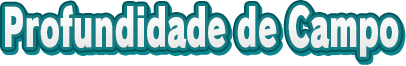
<style>
.page{position:relative;width:406px;height:66px;background:#ffffff}
.page>*{position:absolute;margin:0}
.t1{font:52px "RodinPro-UB";letter-spacing:-0.003em;color:#f3f3f4;scale:0.59 1}
</style>
<div class="page">
<p class="t1" style="left:5px;top:5px;width:394px;height:52px">Profundidade de Campo</p>
</div>
